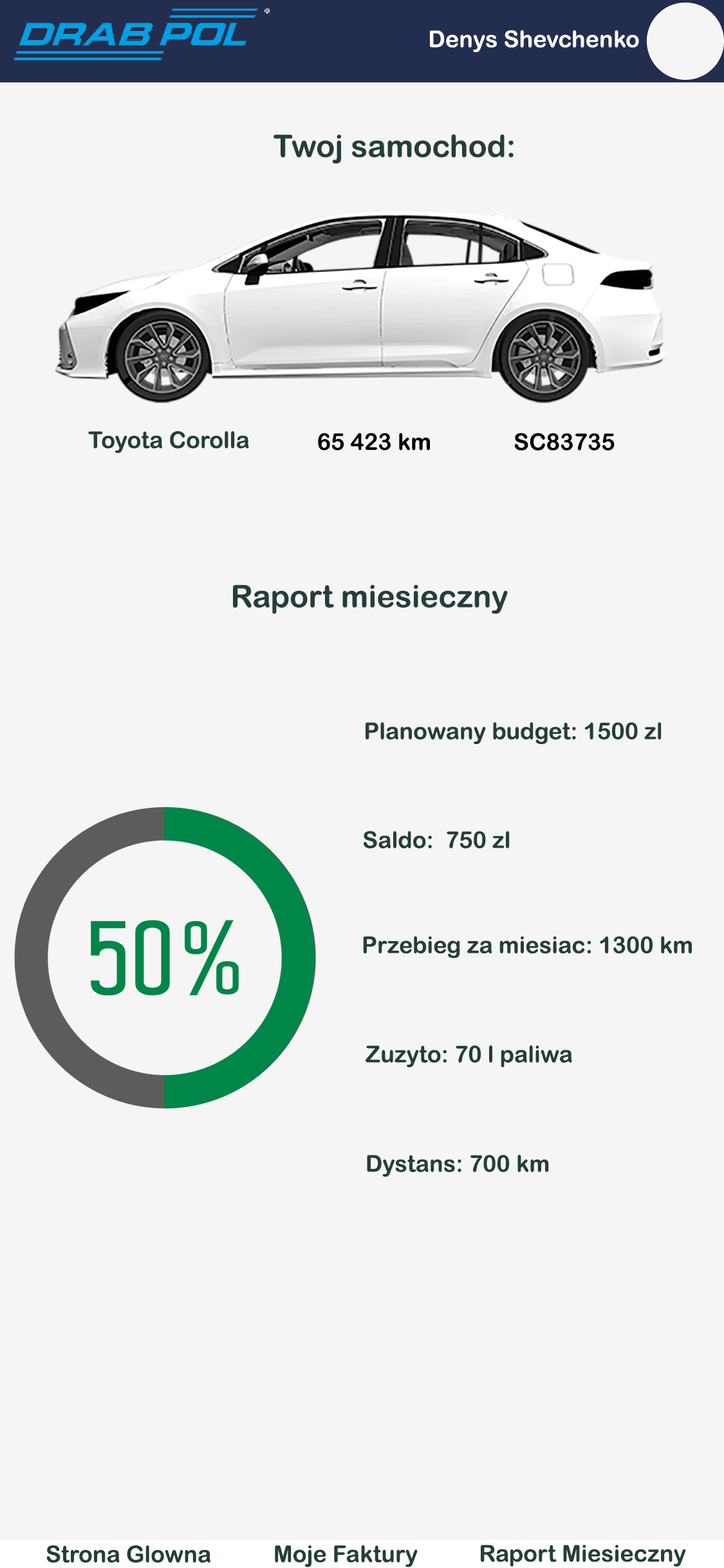
<style>
.page{position:relative;width:724px;height:1568px;background:#f5f5f5}
.page>*{position:absolute;margin:0}
.t1{font:30.9px "ArialRoundedMTBold";color:#233e3b}
.t2{font:23.2px "ArialRoundedMTBold";color:#233e3b}
.t3{font:23.2px "ArialRoundedMTBold";color:#000000}
</style>
<div class="page">
<p class="t1" style="left:274px;top:134px;width:240px;height:29px">Twoj samochod:</p>
<p class="t2" style="left:88px;top:431px;width:161px;height:22px">Toyota Corolla</p>
<p class="t3" style="left:318px;top:433px;width:112px;height:18px">65 423 km</p>
<p class="t3" style="left:514px;top:433px;width:101px;height:18px">SC83735</p>
<p class="t1" style="left:233px;top:584px;width:275px;height:30px">Raport miesieczny</p>
<p class="t2" style="left:366px;top:722px;width:296px;height:22px">Planowany budget: 1500 zl</p>
<p class="t2" style="left:364px;top:831px;width:146px;height:17px">Saldo:  750 zl</p>
<p class="t2" style="left:363px;top:936px;width:329px;height:22px">Przebieg za miesiac: 1300 km</p>
<p class="t2" style="left:366px;top:1045px;width:206px;height:22px">Zuzyto: 70 l paliwa</p>
<p class="t2" style="left:367px;top:1155px;width:182px;height:22px">Dystans: 700 km</p>
<p class="t2" style="left:46px;top:1545px;width:164px;height:18px">Strona Glowna</p>
<p class="t2" style="left:275px;top:1545px;width:143px;height:22px">Moje Faktury</p>
<p class="t2" style="left:481px;top:1545px;width:205px;height:22px">Raport Miesieczny</p>
</div>
